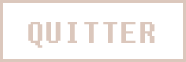
<style>
.page{position:relative;width:186px;height:62px;background:#ffffff}
.page>*{position:absolute;margin:0}
.t1{font:30px "Fixedsys";color:#dbc7bc}
</style>
<div class="page">
<p class="t1" style="left:28px;top:22px;width:127px;height:26px">QUITTER</p>
</div>
